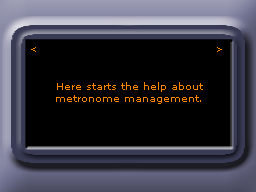
<style>
.page{position:relative;width:256px;height:192px;background:#000000}
.page>*{position:absolute;margin:0}
.t1{font:9px "MSReferenceSansSerif";color:#ff8400}
.t2{font:10px "MSReferenceSansSerif";color:#ff8400}
</style>
<div class="page">
<p class="t1" style="left:31px;top:47px;width:5px;height:5px">&lt;</p>
<p class="t1" style="left:217px;top:47px;width:5px;height:5px">&gt;</p>
<p class="t2" style="left:56px;top:82px;width:147px;height:22px;text-align:center">Here starts the help about<br>metronome management.</p>
</div>
